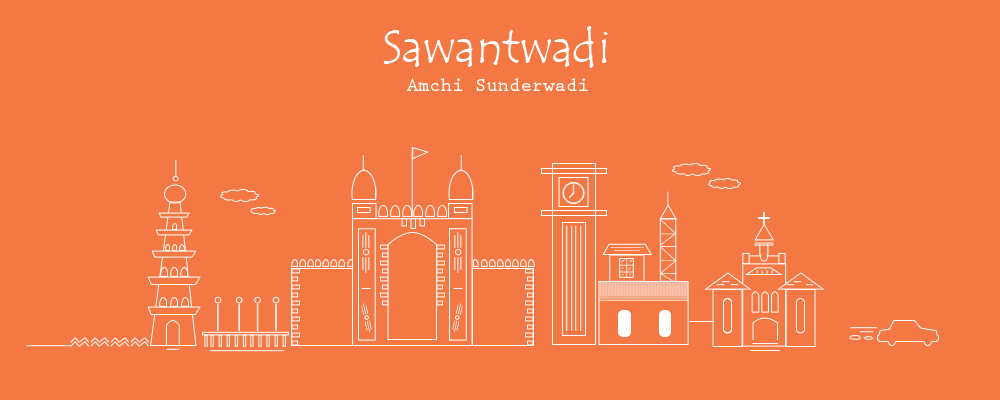
<style>
.page{position:relative;width:1000px;height:400px;background:#f47844}
.page>*{position:absolute;margin:0}
.t1{font:48px "TempusSansITC";color:#ffffff}
.t2{font:19px "PrestigeEliteStd-Bd";color:#ffffff}
.t3{font:23px "CenturyGothic";letter-spacing:0.28em;color:#ffffff}
</style>
<div class="page">
<p class="t1" style="left:383px;top:26px;width:225px;height:42px">Sawantwadi</p>
<p class="t2" style="left:407px;top:78px;width:181px;height:13px">Amchi Sunderwadi</p>
<p class="t3" style="left:758px;top:212px;width:12px;height:12px">+</p>
</div>
